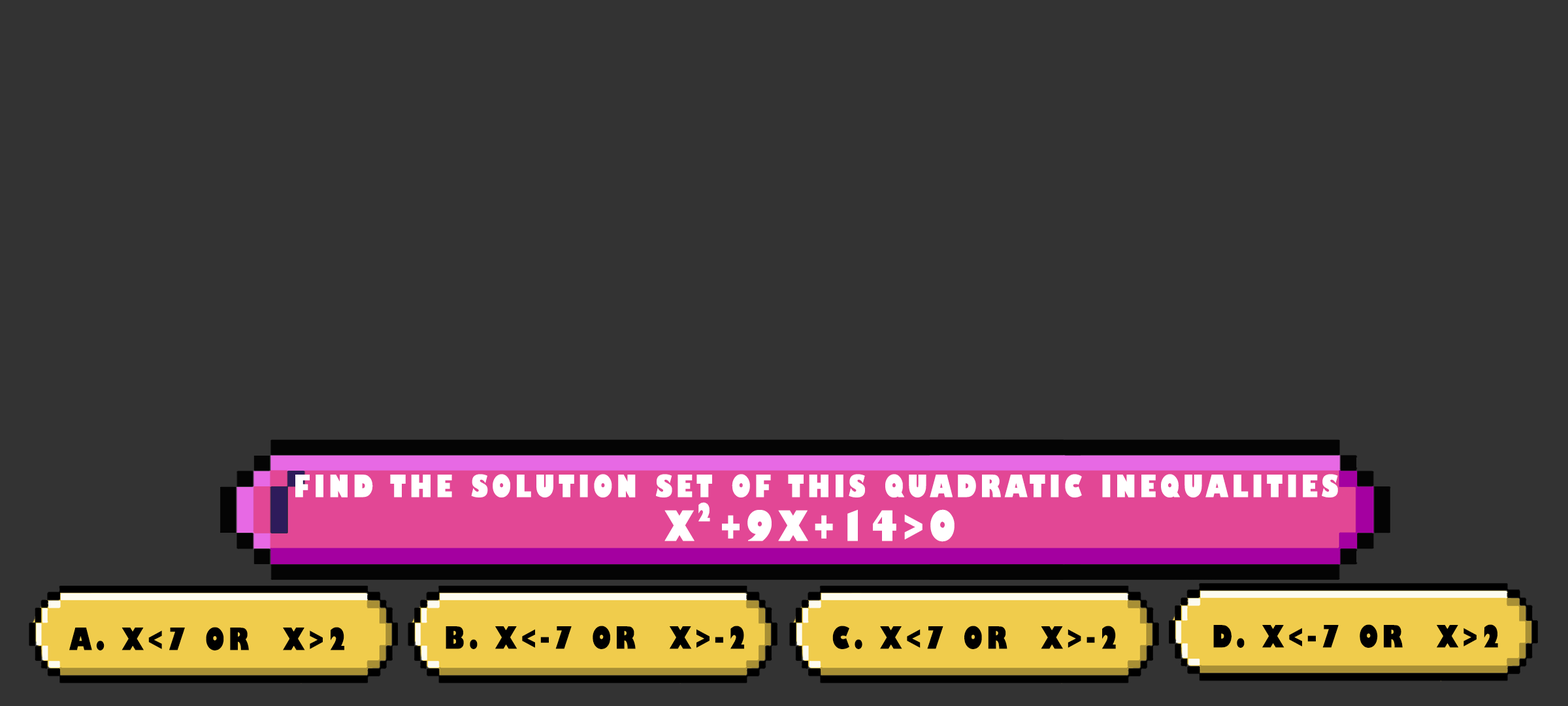
<style>
.page{position:relative;width:1568px;height:706px;background:#333333}
.page>*{position:absolute;margin:0}
.t1{font:30px "GillSans-UltraBoldCondensed";letter-spacing:0.115em;color:#ffffff;text-transform:uppercase;scale:1.12 1}
.t2{font:40.8px "GillSans-UltraBoldCondensed";letter-spacing:0.115em;color:#ffffff;text-transform:uppercase;scale:1.12 1}
.t3{font:24.5px "GillSans-UltraBoldCondensed";letter-spacing:0.115em;color:#ffffff;text-transform:uppercase;scale:1.12 1}
.t4{font:29.9px "GillSans-UltraBoldCondensed";letter-spacing:0.115em;color:#000000;text-transform:uppercase;scale:1.12 1}
</style>
<div class="page">
<p class="t1" style="left:295px;top:474px;width:1043px;height:23px">find the solution set of this quadratic inequalities</p>
<p class="t2" style="left:664px;top:509px;width:291px;height:33px">x +9x+14&gt;0</p>
<p class="t3" style="left:698px;top:502px;width:12px;height:19px">2</p>
<p class="t4" style="left:69px;top:627px;width:275px;height:23px">a. X&lt;7 or  X&gt;2</p>
<p class="t4" style="left:446px;top:625px;width:298px;height:24px">b. X&lt;-7 or  X&gt;-2</p>
<p class="t4" style="left:832px;top:625px;width:284px;height:24px">c. X&lt;7 or  X&gt;-2</p>
<p class="t4" style="left:1213px;top:624px;width:285px;height:23px">d. X&lt;-7 or  X&gt;2</p>
</div>
